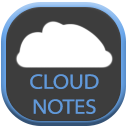
<style>
.page{position:relative;width:128px;height:128px;background:#3d3d3d}
.page>*{position:absolute;margin:0}
.t1{font:20.8px "MyriadConceptRoman-SemiExtended";color:#6199d9}
</style>
<div class="page">
<p class="t1" style="left:30px;top:74px;width:69px;height:40px;text-align:center">CLOUD<br>NOTES</p>
</div>
